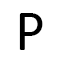
<style>
.page{position:relative;width:64px;height:64px;background:#ffffff}
.page>*{position:absolute;margin:0}
.t1{font:58.3px "Calibri";color:#000000}
</style>
<div class="page">
<p class="t1" style="left:19px;top:13px;width:24px;height:37px">Р</p>
</div>
